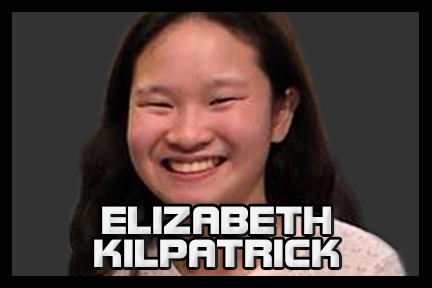
<style>
.page{position:relative;width:432px;height:288px;background:#333333}
.page>*{position:absolute;margin:0}
.t1{font:41.7px/33.3px "BolsterBold";color:#f3f3f3}
</style>
<div class="page">
<p class="t1" style="left:94px;top:206px;width:246px;height:61px;text-align:center">ELIZABETH<br>KILPATRICK</p>
</div>
